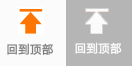
<style>
.page{position:relative;width:132px;height:66px;background:#fcfbfb}
.page>*{position:absolute;margin:0}
.t1{font:11.1px "MicrosoftYaHei";letter-spacing:0.06em;color:#fcfbfb;font-weight:bold;scale:0.97 1}
</style>
<div class="page">
<p class="t1" style="left:75px;top:42px;width:47px;height:12px">回到顶部</p>
</div>
